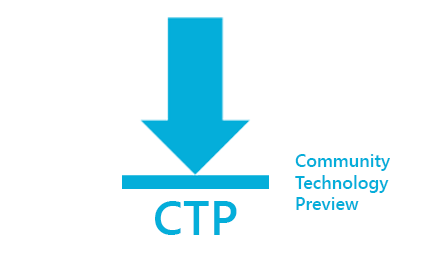
<style>
.page{position:relative;width:448px;height:256px;background:#ffffff}
.page>*{position:absolute;margin:0}
.t1{font:18px "SegoeUI-Semibold";color:#04aeda}
.t2{font:48px "SegoeUI-Semibold";color:#04aeda}
</style>
<div class="page">
<p class="t1" style="left:295px;top:154px;width:95px;height:56px">Community<br>Technology<br>Preview</p>
<p class="t2" style="left:155px;top:201px;width:82px;height:34px">CTP</p>
</div>
